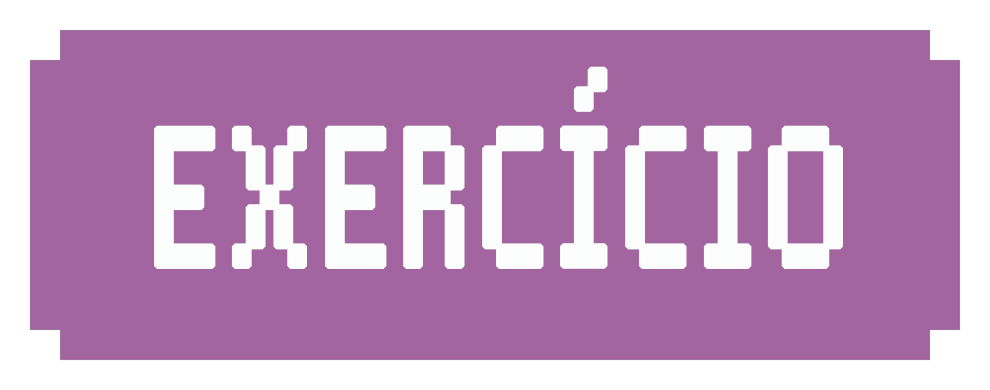
<style>
.page{position:relative;width:990px;height:390px;background:#a365a0}
.page>*{position:absolute;margin:0}
.t1{font:255px "Pixelade";letter-spacing:0.025em;color:#fcfefe;font-weight:bold;scale:0.71 1}
</style>
<div class="page">
<p class="t1" style="left:154px;top:66px;width:689px;height:203px">EXERCÍCIO</p>
</div>
